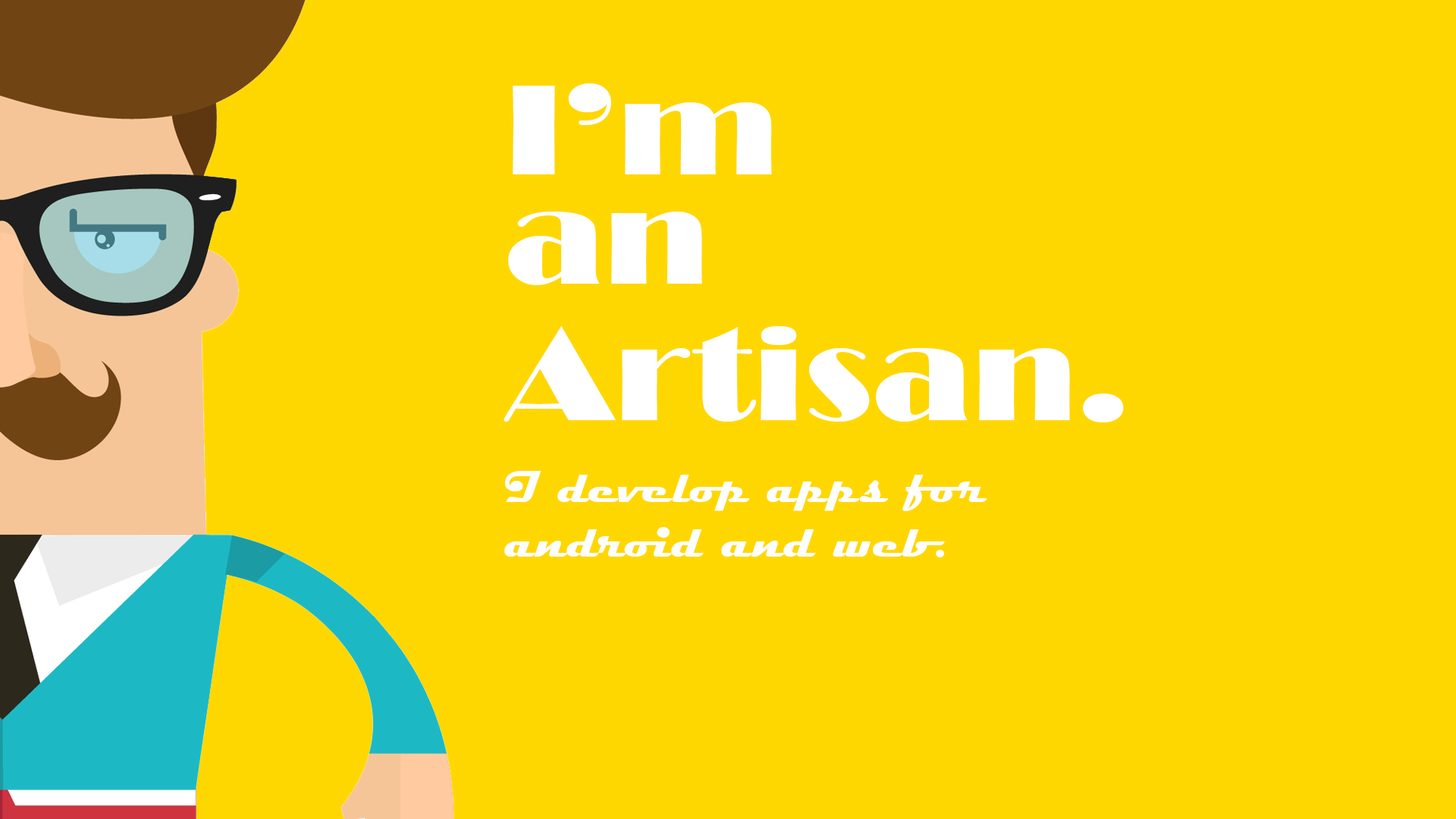
<style>
.page{position:relative;width:1456px;height:819px;background:#ffd700}
.page>*{position:absolute;margin:0}
.t1{font:45.5px/27.3px "Magneto-Bold";letter-spacing:0.002em;color:#ffffff;scale:1.05 1}
.t2{font:132.7px/27.3px "Broadway";letter-spacing:0.002em;color:#ffffff;scale:1.05 1}
</style>
<div class="page">
<p class="t1" style="left:504px;top:83px;width:620px;height:474px"><span class="t2">I’m<br><br><br><br>an<br><br><br><br><br>Artisan.<br><br><br></span>I develop apps for <br><br>android and web.</p>
</div>
